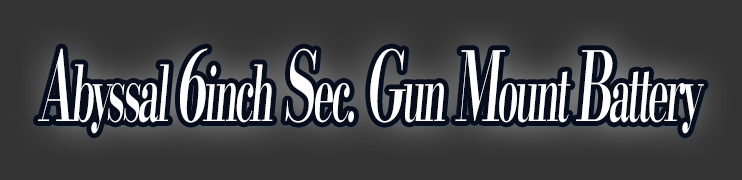
<style>
.page{position:relative;width:742px;height:180px;background:#333333}
.page>*{position:absolute;margin:0}
.t1{font:76.8px "KochoStd-Heavy";letter-spacing:-0.08em;color:#ffffff;font-style:italic;scale:0.5 1}
.t2{font:96px "KochoStd-Heavy";letter-spacing:-0.08em;color:#ffffff;font-style:italic;scale:0.5 1}
</style>
<div class="page">
<p class="t1" style="left:38px;top:48px;width:666px;height:86px"><span class="t2">A</span>byssal <span class="t2">6</span>inch<span class="t2"> S</span>ec.<span class="t2"> G</span>un<span class="t2"> M</span>ount <span class="t2">B</span>attery</p>
</div>
